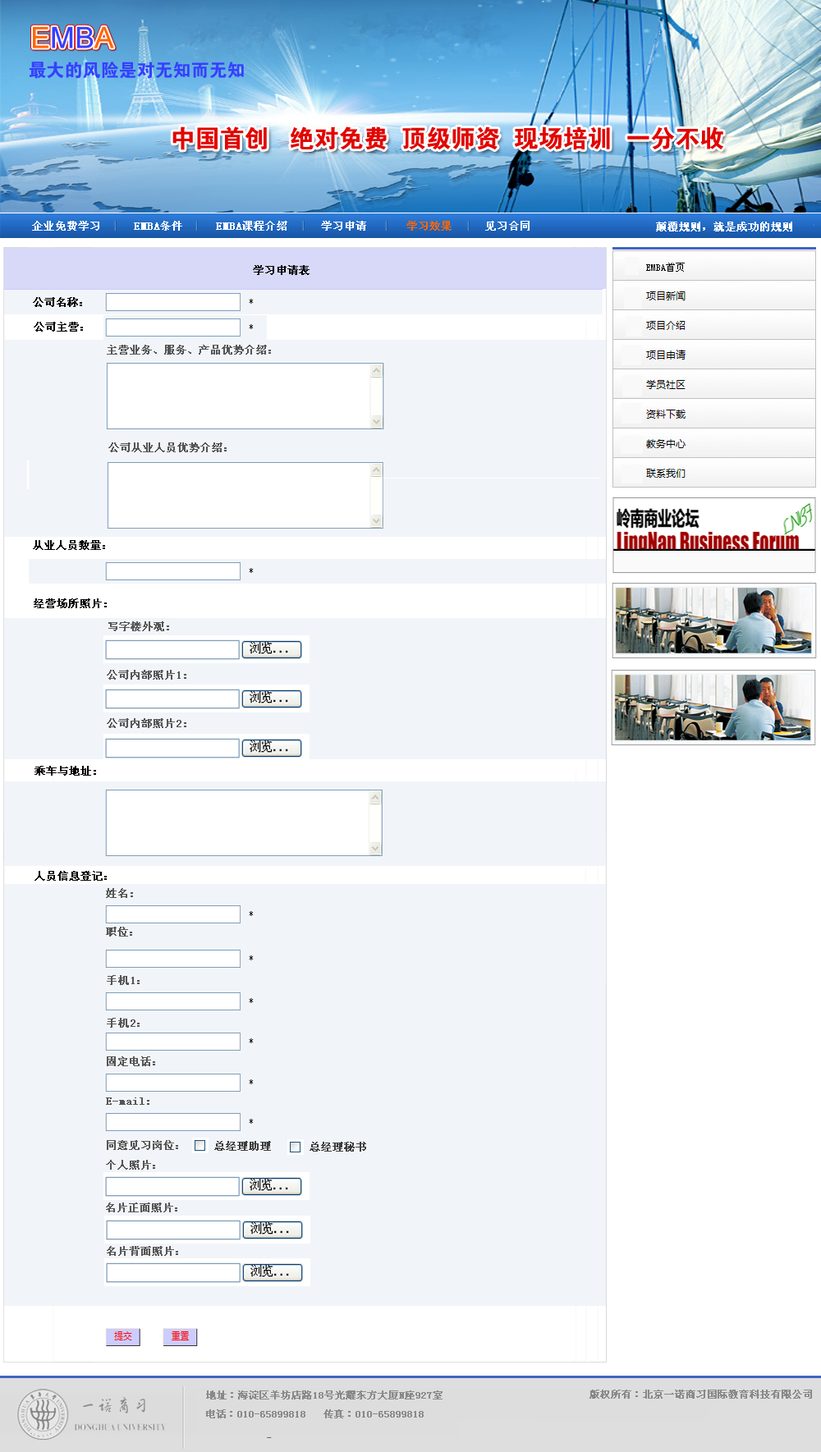
<style>
.page{position:relative;width:821px;height:1452px;background:#f1f5f9}
.page>*{position:absolute;margin:0}
.t1{font:18.1px "FZDHTJW--GB1-0";color:#363fff}
.t2{font:24.6px "FZDHTJW--GB1-0";color:#e10602}
.t3{font:10.7px "SimSun";color:#fdfdfe;font-weight:bold}
.t4{font:10.7px "SimSun";color:#fffdfd;font-weight:bold}
.t5{font:10.7px "SimSun";color:#ff6600;font-weight:bold}
.t6{font:10.7px "SimSun";color:#fbfbfc;font-weight:bold}
.t7{font:10.7px "SimSun";color:#030303;font-weight:bold}
.t8{font:10.7px "SimSun";color:#020202;font-weight:bold}
.t9{font:10.7px "SimSun";color:#565656;font-weight:bold}
.t10{font:10.7px "SimSun";color:#3e3e3e;font-weight:bold}
.t11{font:18.1px "FZHCJW--GB1-0";color:#898989}
.t12{font:9.9px "SimSun";color:#898989;font-weight:bold}
</style>
<div class="page">
<p class="t1" style="left:29px;top:62px;width:215px;height:17px">最大的风险是对无知而无知</p>
<p class="t2" style="left:172px;top:126px;width:551px;height:24px">中国首创   绝对免费  顶级师资  现场培训  一分不收</p>
<p class="t3" style="left:32px;top:221px;width:498px;height:10px"><span class="t4">企业免费学习</span>     EMBA条件     EMBA课程介绍     学习申请      <span class="t5">学习效果</span>     见习合同</p>
<p class="t6" style="left:656px;top:222px;width:136px;height:10px">颠覆规则，就是成功的规则</p>
<p class="t7" style="left:253px;top:265px;width:57px;height:10px">学习申请表</p>
<p class="t8" style="left:33px;top:297px;width:49px;height:10px">公司名称：</p>
<p class="t8" style="left:34px;top:322px;width:49px;height:10px">公司主营：</p>
<p class="t9" style="left:107px;top:345px;width:164px;height:10px">主营业务、服务、产品优势介绍：</p>
<p class="t9" style="left:108px;top:443px;width:119px;height:9px">公司从业人员优势介绍：</p>
<p class="t8" style="left:33px;top:540px;width:72px;height:10px">从业人员数量：</p>
<p class="t8" style="left:34px;top:599px;width:73px;height:9px">经营场所照片:</p>
<p class="t9" style="left:108px;top:622px;width:61px;height:9px">写字楼外观:</p>
<p class="t9" style="left:107px;top:670px;width:79px;height:10px">公司内部照片1:</p>
<p class="t9" style="left:107px;top:718px;width:79px;height:10px">公司内部照片2:</p>
<p class="t8" style="left:34px;top:766px;width:62px;height:10px">乘车与地址:</p>
<p class="t8" style="left:34px;top:871px;width:73px;height:10px">人员信息登记：</p>
<p class="t9" style="left:106px;top:888px;width:27px;height:10px">姓名:</p>
<p class="t9" style="left:106px;top:927px;width:26px;height:10px">职位：</p>
<p class="t9" style="left:107px;top:975px;width:33px;height:10px">手机1：</p>
<p class="t9" style="left:107px;top:1018px;width:33px;height:10px">手机2：</p>
<p class="t9" style="left:107px;top:1057px;width:48px;height:10px">固定电话：</p>
<p class="t9" style="left:106px;top:1098px;width:43px;height:7px">E-mail:</p>
<p class="t9" style="left:107px;top:1140px;width:71px;height:10px">同意见习岗位：</p>
<p class="t10" style="left:214px;top:1141px;width:57px;height:10px">总经理助理</p>
<p class="t10" style="left:310px;top:1142px;width:56px;height:10px">总经理秘书</p>
<p class="t9" style="left:106px;top:1160px;width:49px;height:10px">个人照片：</p>
<p class="t9" style="left:106px;top:1203px;width:71px;height:10px">名片正面照片：</p>
<p class="t9" style="left:107px;top:1246px;width:71px;height:10px">名片背面照片：</p>
<p class="t11" style="left:82px;top:1397px;width:63px;height:17px">一诺商习</p>
<p class="t12" style="left:206px;top:1391px;width:237px;height:9px">地址：海淀区羊坊店路18号光耀东方大厦N座927室</p>
<p class="t12" style="left:589px;top:1390px;width:223px;height:9px">版权所有：北京一诺商习国际教育科技有限公司</p>
<p class="t12" style="left:206px;top:1410px;width:218px;height:9px">电话：010-65899818   传真：010-65899818</p>
</div>
